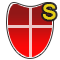
<style>
.page{position:relative;width:60px;height:60px;background:#ffffff}
.page>*{position:absolute;margin:0}
.t1{font:20.7px "ArialMT";color:#e6d017;font-weight:bold}
</style>
<div class="page">
<p class="t1" style="left:43px;top:4px;width:13px;height:16px">S</p>
</div>
